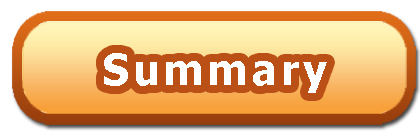
<style>
.page{position:relative;width:420px;height:135px;background:#ffffff}
.page>*{position:absolute;margin:0}
.t1{font:41.7px "Tahoma-Bold";letter-spacing:0.1em;color:#ffffff}
</style>
<div class="page">
<p class="t1" style="left:104px;top:53px;width:223px;height:40px">Summary</p>
</div>
